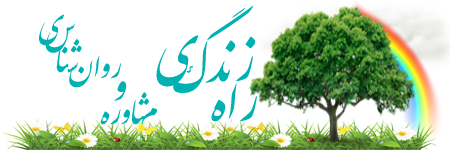
<style>
.page{position:relative;width:450px;height:160px;background:#ffffff}
.page>*{position:absolute;margin:0}
.t1{font:60px "IranNastaliq";color:#00b1b2}
.t2{font:36px "IranNastaliq";color:#00b1b2}
.t3{font:48px "IranNastaliq";color:#00b1b2}
</style>
<div class="page">
<p class="t1" style="left:173px;top:5px;width:80px;height:88px">گ</p>
<p class="t2" style="left:39px;top:14px;width:25px;height:32px">ي</p>
<p class="t2" style="left:45px;top:23px;width:30px;height:30px">س</p>
<p class="t2" style="left:56px;top:39px;width:26px;height:34px">شنا</p>
<p class="t1" style="left:156px;top:35px;width:43px;height:52px">ي</p>
<p class="t1" style="left:205px;top:36px;width:51px;height:47px">زند</p>
<p class="t2" style="left:69px;top:55px;width:52px;height:33px">روان</p>
<p class="t3" style="left:114px;top:81px;width:13px;height:20px">و</p>
<p class="t1" style="left:211px;top:83px;width:46px;height:39px">راه</p>
<p class="t2" style="left:100px;top:92px;width:50px;height:33px">شاوره</p>
<p class="t2" style="left:140px;top:108px;width:18px;height:36px">م</p>
</div>
